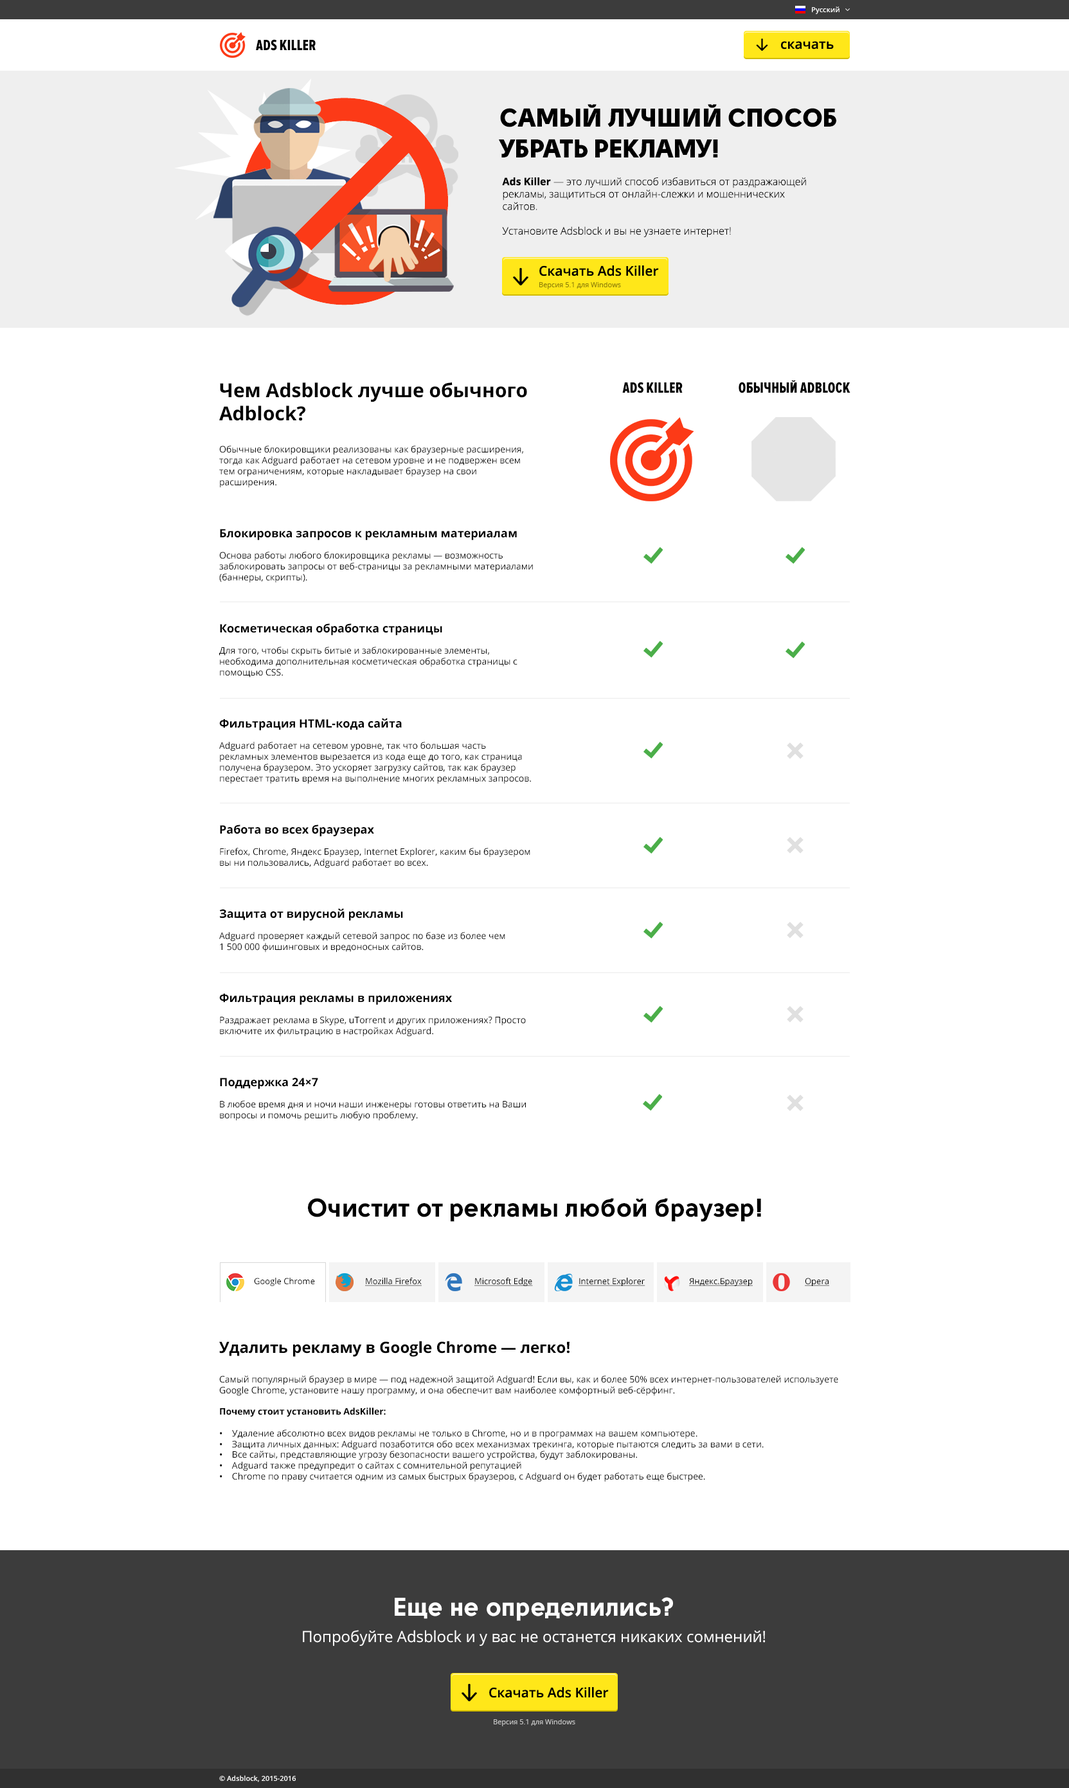
<style>
.page{position:relative;width:1069px;height:1788px;background:#ffffff}
.page>*{position:absolute;margin:0}
.t1{font:7.1px "OpenSans-Semibold";color:#ffffff}
.t2{font:15.4px "ProximaNovaExCn-Extrabld";color:#000000;text-transform:uppercase}
.t3{font:13.5px "OpenSans-Semibold";color:#000000}
.t4{font:25.7px "Solomon-Sans-Black";color:#000000;text-transform:uppercase}
.t5{font:10.3px "OpenSans-Light";color:#000000}
.t6{font:10.3px "OpenSans-Bold";color:#000000}
.t7{font:7.1px "OpenSans";color:#8d7f08}
.t8{font:9px "OpenSans";color:#000000}
.t9{font:19.3px "OpenSans-Bold";color:#000000}
.t10{font:11.6px "OpenSans-Bold";color:#000000}
.t11{font:25.7px "Solomon-Sans-Bold";color:#000000}
.t12{font:8.4px "OpenSans";color:#000000}
.t13{font:8.4px "OpenSans";color:#000000;text-decoration:underline}
.t14{font:15.4px "OpenSans-Bold";color:#000000}
.t15{font:9px "OpenSans-Bold";color:#000000}
.t16{font:25.7px "Solomon-Sans-Bold";color:#ffffff}
.t17{font:15.4px "OpenSans";color:#ffffff}
.t18{font:7.1px "OpenSans";color:#c1c1c1}
</style>
<div class="page">
<p class="t1" style="left:812px;top:6px;width:28px;height:8px">Русский</p>
<p class="t2" style="left:256px;top:39px;width:60px;height:12px">Ads Killer</p>
<p class="t3" style="left:781px;top:41px;width:53px;height:9px">cкачать</p>
<p class="t4" style="left:499px;top:104px;width:337px;height:54px">Самый лучший способ <br>убрать рекламу!</p>
<p class="t5" style="left:502px;top:177px;width:304px;height:60px"><span class="t6">Ads Killer</span> — это лучший способ избавиться от раздражающей рекламы, защититься от онлайн-слежки и мошеннических сайтов. <br><br>Установите Adsblock и вы не узнаете интернет!</p>
<p class="t3" style="left:539px;top:266px;width:120px;height:10px">Скачать Ads Killer</p>
<p class="t7" style="left:539px;top:282px;width:82px;height:7px">Версия 5.1 для Windows</p>
<p class="t8" style="left:219px;top:382px;width:308px;height:106px"><span class="t9">Чем Adsblock лучше обычного <br>Adblock?<br></span><br><br>Обычные блокировщики реализованы как браузерные расширения, тогда как Adguard работает на сетевом уровне и не подвержен всем тем ограничениям, которые накладывает браузер на свои расширения.</p>
<p class="t2" style="left:622px;top:382px;width:61px;height:11px">Ads Killer</p>
<p class="t2" style="left:739px;top:380px;width:112px;height:13px">обычный adblock</p>
<p class="t8" style="left:219px;top:529px;width:314px;height:54px"><span class="t10">Блокировка запросов к рекламным материалам<br></span><br>Основа работы любого блокировщика рекламы — возможность заблокировать запросы от веб-страницы за рекламными материалами (баннеры, скрипты).</p>
<p class="t8" style="left:219px;top:624px;width:299px;height:54px"><span class="t10">Косметическая обработка страницы<br></span><br>Для того, чтобы скрыть битые и заблокированные элементы, необходима дополнительная косметическая обработка страницы с помощью CSS.</p>
<p class="t8" style="left:219px;top:718px;width:312px;height:66px"><span class="t10">Фильтрация HTML-кода сайта<br></span><br>Adguard работает на сетевом уровне, так что большая часть рекламных элементов вырезается из кода еще до того, как страница получена браузером. Это ускоряет загрузку сайтов, так как браузер перестает тратить время на выполнение многих рекламных запросов.</p>
<p class="t8" style="left:220px;top:825px;width:310px;height:44px"><span class="t10">Работа во всех браузерах<br></span><br>Firefox, Chrome, Яндекс Браузер, Internet Explorer, каким бы браузером вы ни пользовались, Adguard работает во всех.</p>
<p class="t8" style="left:219px;top:908px;width:286px;height:45px"><span class="t10">Защита от вирусной рекламы<br></span><br>Adguard проверяет каждый сетевой запрос по базе из более чем <br>1 500 000 фишинговых и вредоносных сайтов.</p>
<p class="t8" style="left:219px;top:994px;width:307px;height:43px"><span class="t10">Фильтрация рекламы в приложениях<br></span><br>Раздражает реклама в Skype, uTorrent и других приложениях? Просто включите их фильтрацию в настройках Adguard.</p>
<p class="t8" style="left:220px;top:1078px;width:306px;height:43px"><span class="t10">Поддержка 24×7<br></span><br>В любое время дня и ночи наши инженеры готовы ответить на Ваши вопросы и помочь решить любую проблему.</p>
<p class="t11" style="left:308px;top:1198px;width:453px;height:24px">Очистит от рекламы любой браузер!</p>
<p class="t12" style="left:254px;top:1278px;width:61px;height:8px">Google Chrome</p>
<p class="t13" style="left:365px;top:1278px;width:57px;height:8px">Mozilla Firefox</p>
<p class="t13" style="left:474px;top:1278px;width:59px;height:8px">Microsoft Edge</p>
<p class="t13" style="left:579px;top:1278px;width:66px;height:8px">Internet Explorer</p>
<p class="t13" style="left:689px;top:1278px;width:64px;height:8px">Яндекс.Браузер</p>
<p class="t13" style="left:805px;top:1278px;width:24px;height:8px">Opera</p>
<p class="t8" style="left:219px;top:1341px;width:619px;height:141px"><span class="t14">Удалить рекламу в Google Chrome — легко!<br><br></span>Самый популярный браузер в мире — под надежной защитой Adguard! Если вы, как и более 50% всех интернет-пользователей используете Google Chrome, установите нашу программу, и она обеспечит вам наиболее комфортный веб-сёрфинг.<br><br><span class="t15">Почему стоит установить AdsKiller:<br></span><br>•    Удаление абсолютно всех видов рекламы не только в Chrome, но и в программах на вашем компьютере.<br>•    Защита личных данных: Adguard позаботится обо всех механизмах трекинга, которые пытаются следить за вами в сети.<br>•    Все сайты, представляющие угрозу безопасности вашего устройства, будут заблокированы.<br>•    Adguard также предупредит о сайтах с сомнительной репутацией<br>•    Chrome по праву считается одним из самых быстрых браузеров, с Adguard он будет работать еще быстрее.</p>
<p class="t16" style="left:395px;top:1598px;width:278px;height:23px">Еще не определились?</p>
<p class="t17" style="left:303px;top:1630px;width:463px;height:16px">Попробуйте Adsblock и у вас не останется никаких сомнений!</p>
<p class="t3" style="left:489px;top:1688px;width:120px;height:10px">Скачать Ads Killer</p>
<p class="t18" style="left:494px;top:1720px;width:81px;height:7px">Версия 5.1 для Windows</p>
<p class="t1" style="left:219px;top:1776px;width:77px;height:7px">© Adsblock, 2015-2016</p>
</div>
